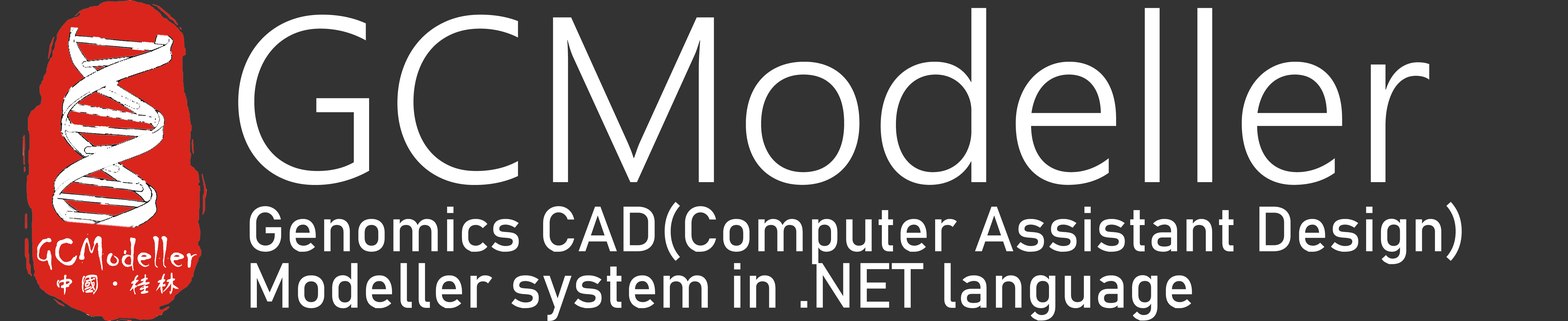
<style>
.page{position:relative;width:1568px;height:321px;background:#333333}
.page>*{position:absolute;margin:0}
.t1{font:235.2px "SegoeUI-Semilight";color:#ffffff}
.t2{font:62.7px/56.4px "Bahnschrift";color:#ffffff}
</style>
<div class="page">
<p class="t1" style="left:238px;top:8px;width:1191px;height:177px">GCModeller</p>
<p class="t2" style="left:250px;top:202px;width:1212px;height:119px">Genomics CAD(Computer Assistant Design) <br>Modeller system in .NET language</p>
</div>
